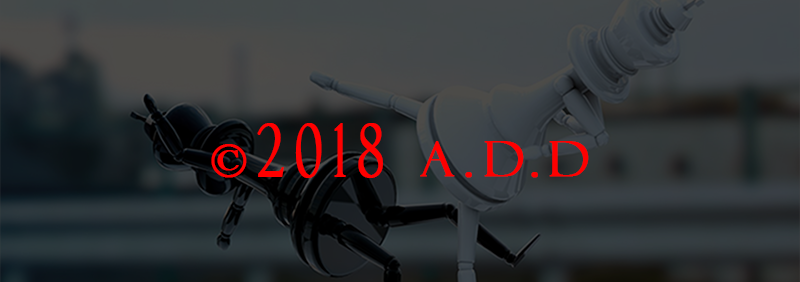
<style>
.page{position:relative;width:800px;height:282px}
.page>*{position:absolute;margin:0}
.t1{font:48px "FelixTitlingMT";letter-spacing:0.2em;color:#ff0000;font-weight:bold}
.t2{font:72px "FelixTitlingMT";letter-spacing:0.2em;color:#ff0000;font-weight:bold;scale:0.67 1}
</style>
<div class="page">
<p class="t1" style="left:211px;top:123px;width:378px;height:55px">©<span class="t2">2018</span> a.d.d</p>
</div>
